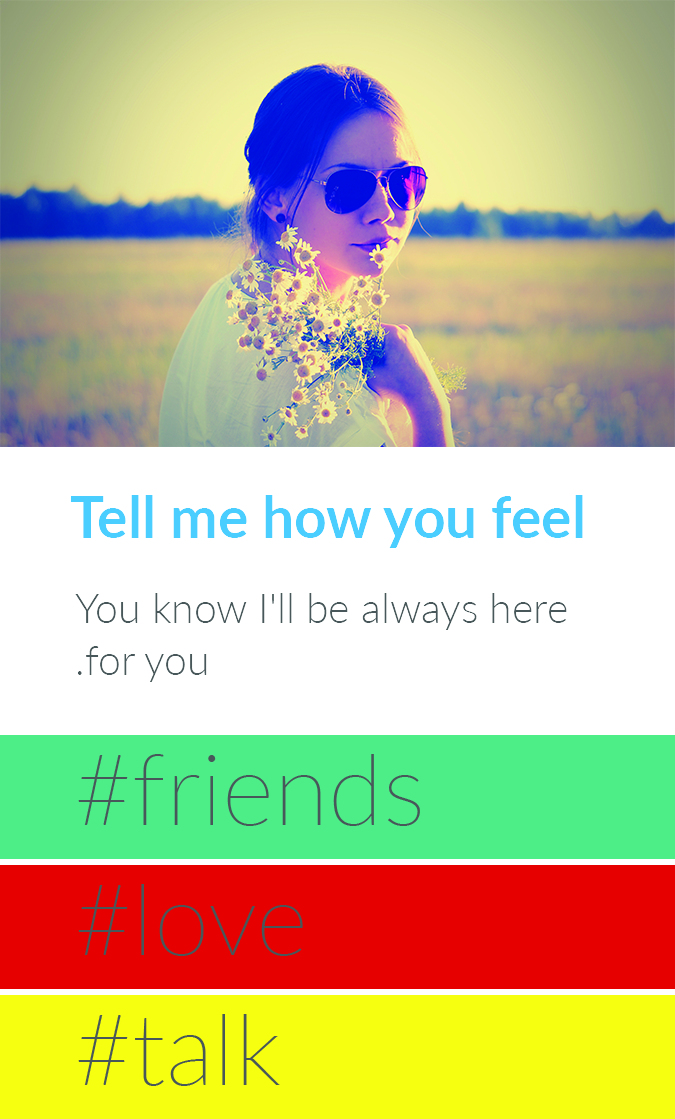
<style>
.page{position:relative;width:675px;height:1119px;background:#ffffff}
.page>*{position:absolute;margin:0}
.t1{font:57px "Lato-Bold";color:#4acdff}
.t2{font:41px/52px "Lato-Light";color:#48585a}
</style>
<div class="page">
<p class="t1" style="left:70px;top:495px;width:513px;height:53px">Tell me how you feel</p>
<p class="t2" style="left:75px;top:593px;width:492px;height:89px;text-align:right">You know I'll be always here for you.</p>
</div>
